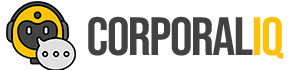
<style>
.page{position:relative;width:294px;height:70px;background:#ffffff}
.page>*{position:absolute;margin:0}
.t1{font:53.7px "BebasNeue-Regular";letter-spacing:-0.03em;color:#424242;scale:1.07 1}
.t2{font:53.7px "BebasNeue-Regular";letter-spacing:-0.03em;color:#ffc107;scale:1.07 1}
</style>
<div class="page">
<p class="t1" style="left:88px;top:16px;width:196px;height:43px">CORPORAL<span class="t2">IQ</span></p>
</div>
